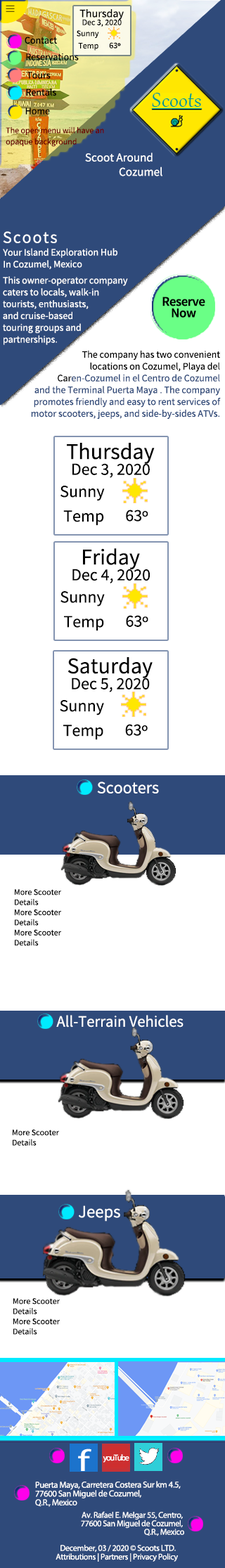
<style>
.page{position:relative;width:225px;height:1568px;background:#ffffff}
.page>*{position:absolute;margin:0}
.t1{font:8.4px/2.8px "SourceSansRoman-Regular"}
.t2{font:11.2px "SourceSansRoman-Regular";color:#000000}
.t3{font:8.4px "SourceSansRoman-Regular";color:#000000}
.t4{font:9.8px "SourceSansRoman-Regular";color:#000000}
.t5{font:8.4px "MyriadPro-Regular";color:#000000}
.t6{font:8.4px/11.2px "SourceSansRoman-Regular";color:#6b0000}
.t7{font:12px "SourceSansRoman-Regular";color:#ffffff}
.t8{font:16.9px "SourceSansRoman-Regular";letter-spacing:0.08em;color:#ffffff}
.t9{font:9.8px "SourceSansRoman-Regular";color:#ffffff}
.t10{font:13.3px/11.4px "SourceSansRoman_604wght";letter-spacing:-0.025em;color:#000000}
.t11{font:9.8px "SourceSansRoman-Regular";color:#2f4a7a}
.t12{font:22.5px "SourceSansRoman-Regular";color:#000000}
.t13{font:16.9px "SourceSansRoman-Regular";color:#000000}
.t14{font:16.9px "MyriadPro-Regular";color:#000000}
.t15{font:16.9px "SourceSansRoman-Regular";color:#ffffff}
.t16{font:15.8px "SourceSansRoman-Regular";color:#ffffff}
.t17{font:17.3px "SourceSansRoman-Regular";color:#ffffff}
.t18{font:30.2px "MyriadPro-Regular";letter-spacing:-0.025em;color:#ffffff;scale:1.34 1}
.t19{font:8.4px "MyriadPro-Regular";letter-spacing:-0.1em;color:#ffffff}
.t20{font:8.8px/8.8px "MyriadPro-Regular";letter-spacing:-0.025em;color:#ffffff}
.t21{font:8.4px/8.4px "MyriadPro-Regular";letter-spacing:-0.025em;color:#ffffff}
.t22{font:8.4px "MyriadPro-Regular";letter-spacing:-0.025em;color:#ffffff}
</style>
<div class="page">
<p class="t1" style="left:6px;top:5px;width:9px;height:7px">__<br>__<br>__</p>
<p class="t2" style="left:79px;top:9px;width:45px;height:11px">Thursday</p>
<p class="t3" style="left:82px;top:19px;width:40px;height:8px">Dec 3, 2020</p>
<p class="t4" style="left:25px;top:37px;width:32px;height:7px">Contact</p>
<p class="t3" style="left:77px;top:30px;width:22px;height:8px">Sunny</p>
<p class="t4" style="left:26px;top:53px;width:53px;height:7px">Reservations</p>
<p class="t3" style="left:78px;top:43px;width:20px;height:8px">Temp</p>
<p class="t3" style="left:109px;top:42px;width:12px;height:6px">63<span class="t5">º</span></p>
<p class="t4" style="left:27px;top:72px;width:24px;height:7px">Tours</p>
<p class="t4" style="left:26px;top:88px;width:30px;height:8px">Rentals</p>
<p class="t4" style="left:25px;top:108px;width:25px;height:7px">Home</p>
<p class="t6" style="left:6px;top:127px;width:98px;height:20px">The open menu will have an<br>opaque background</p>
<p class="t7" style="left:85px;top:153px;width:77px;height:23px;text-align:right">Scoot Around    <br> Cozumel</p>
<p class="t8" style="left:3px;top:231px;width:54px;height:12px">Scoots</p>
<p class="t9" style="left:3px;top:248px;width:114px;height:21px">Your Island Exploration Hub<br>In Cozumel, Mexico</p>
<p class="t9" style="left:3px;top:276px;width:125px;height:69px">This owner-operator company caters to locals, walk-in <br>tourists, enthusiasts, <br>and cruise-based <br>touring groups and <br>partnerships.</p>
<p class="t10" style="left:162px;top:297px;width:43px;height:21px;text-align:center">Reserve<br>Now</p>
<p class="t11" style="left:31px;top:350px;width:190px;height:69px;text-align:right"><span class="t4">The company has two convenient <br>locations on Cozumel, Playa del <br>Car</span>en-Cozumel in el Centro de Cozumel <br>and the Terminal Puerta Maya . The company <br>promotes friendly and easy to rent services of <br>motor scooters, jeeps, and side-by-sides ATVs.</p>
<p class="t12" style="left:67px;top:443px;width:88px;height:21px">Thursday</p>
<p class="t13" style="left:72px;top:463px;width:78px;height:15px">Dec 3, 2020</p>
<p class="t13" style="left:60px;top:486px;width:45px;height:15px">Sunny</p>
<p class="t13" style="left:126px;top:510px;width:22px;height:11px">63<span class="t14">º</span></p>
<p class="t13" style="left:63px;top:510px;width:41px;height:16px">Temp</p>
<p class="t12" style="left:83px;top:548px;width:57px;height:21px">Friday</p>
<p class="t13" style="left:72px;top:569px;width:78px;height:14px">Dec 4, 2020</p>
<p class="t13" style="left:60px;top:591px;width:45px;height:16px">Sunny</p>
<p class="t13" style="left:64px;top:616px;width:40px;height:15px">Temp</p>
<p class="t13" style="left:126px;top:615px;width:22px;height:12px">63<span class="t14">º</span></p>
<p class="t12" style="left:67px;top:657px;width:86px;height:21px">Saturday</p>
<p class="t13" style="left:72px;top:678px;width:78px;height:14px">Dec 5, 2020</p>
<p class="t13" style="left:60px;top:700px;width:44px;height:15px">Sunny</p>
<p class="t13" style="left:63px;top:725px;width:40px;height:15px">Temp</p>
<p class="t13" style="left:125px;top:724px;width:23px;height:12px">63<span class="t14">º</span></p>
<p class="t15" style="left:97px;top:782px;width:62px;height:11px">Scooters</p>
<p class="t3" style="left:15px;top:889px;width:46px;height:57px">More Scooter <br>Details<br>More Scooter <br>Details<br>More Scooter <br>Details</p>
<p class="t16" style="left:56px;top:1015px;width:127px;height:13px">All-Terrain Vehicles</p>
<p class="t3" style="left:13px;top:1129px;width:46px;height:17px">More Scooter <br>Details</p>
<p class="t17" style="left:79px;top:1205px;width:41px;height:17px">Jeeps</p>
<p class="t3" style="left:13px;top:1298px;width:47px;height:37px">More Scooter <br>Details<br>More Scooter <br>Details</p>
<p class="t18" style="left:78px;top:1449px;width:13px;height:22px">f</p>
<p class="t19" style="left:103px;top:1454px;width:26px;height:9px">youTube</p>
<p class="t20" style="left:35px;top:1481px;width:146px;height:26px">Puerta Maya, Carretera Costera Sur km 4.5, <br>77600 San Miguel de Cozumel, <br>Q.R., Mexico</p>
<p class="t21" style="left:81px;top:1511px;width:103px;height:25px;text-align:right">Av. Rafael E. Melgar 55, Centro, <br>77600 San Miguel de Cozumel, <br>Q.R., Mexico</p>
<p class="t22" style="left:56px;top:1553px;width:122px;height:9px">Attributions | Partners | Privacy Policy</p>
<p class="t22" style="left:60px;top:1545px;width:116px;height:8px">December, 03 / 2020 © Scoots LTD.</p>
</div>
